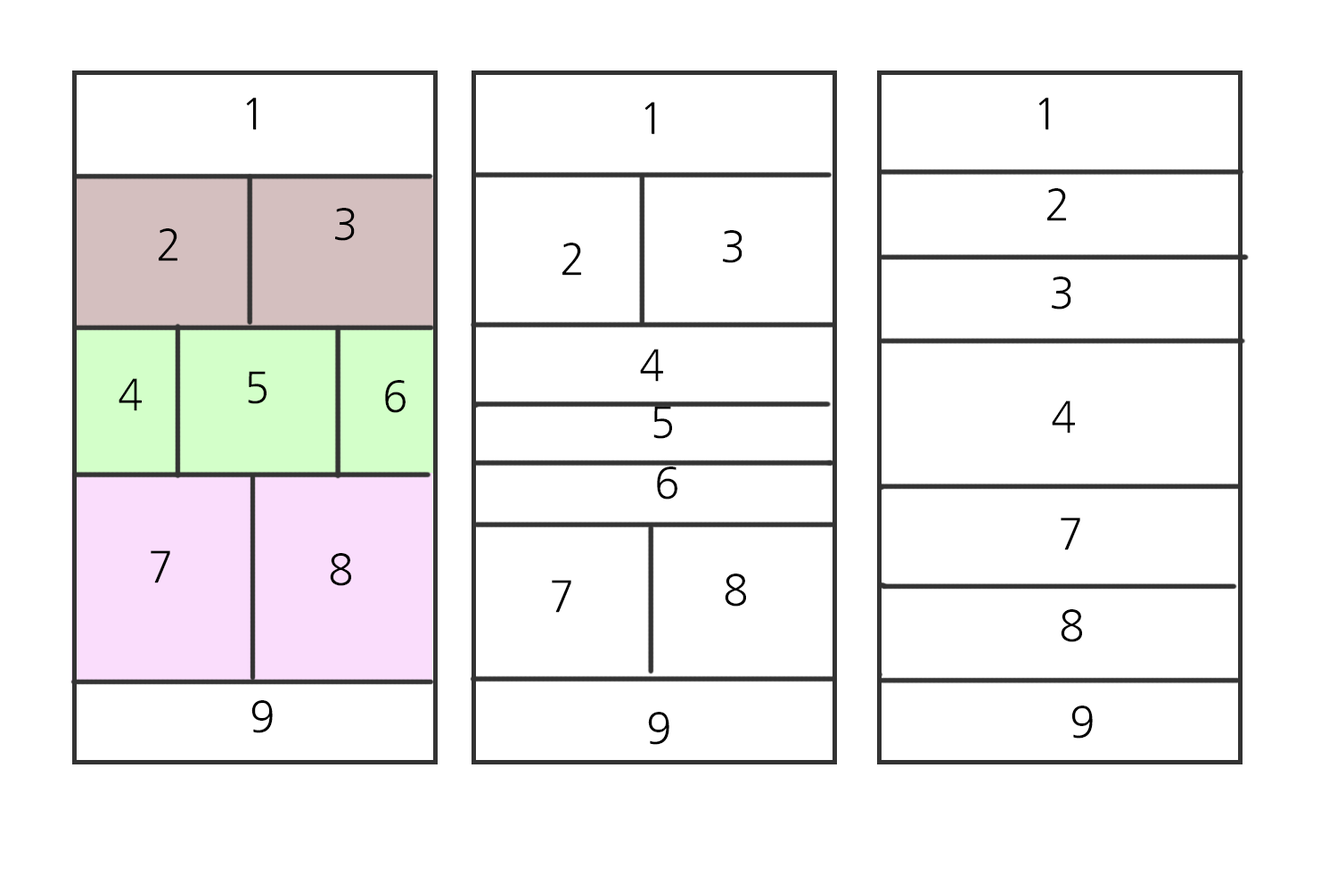
<style>
.page{position:relative;width:1337px;height:892px;background:#ffffff}
.page>*{position:absolute;margin:0}
.t1{font:42.8px "NanumGothic";color:#000000}
</style>
<div class="page">
<p class="t1" style="left:246px;top:97px;width:11px;height:33px">1</p>
<p class="t1" style="left:645px;top:102px;width:10px;height:33px">1</p>
<p class="t1" style="left:1039px;top:97px;width:10px;height:33px">1</p>
<p class="t1" style="left:1048px;top:188px;width:18px;height:33px">2</p>
<p class="t1" style="left:335px;top:208px;width:20px;height:33px">3</p>
<p class="t1" style="left:159px;top:228px;width:18px;height:33px">2</p>
<p class="t1" style="left:723px;top:230px;width:20px;height:33px">3</p>
<p class="t1" style="left:563px;top:243px;width:18px;height:33px">2</p>
<p class="t1" style="left:1052px;top:276px;width:20px;height:33px">3</p>
<p class="t1" style="left:640px;top:349px;width:23px;height:33px">4</p>
<p class="t1" style="left:248px;top:371px;width:19px;height:33px">5</p>
<p class="t1" style="left:119px;top:378px;width:23px;height:33px">4</p>
<p class="t1" style="left:385px;top:380px;width:21px;height:33px">6</p>
<p class="t1" style="left:1052px;top:400px;width:23px;height:33px">4</p>
<p class="t1" style="left:654px;top:406px;width:18px;height:33px">5</p>
<p class="t1" style="left:657px;top:466px;width:21px;height:33px">6</p>
<p class="t1" style="left:1061px;top:517px;width:20px;height:33px">7</p>
<p class="t1" style="left:151px;top:550px;width:19px;height:33px">7</p>
<p class="t1" style="left:330px;top:553px;width:21px;height:33px">8</p>
<p class="t1" style="left:552px;top:580px;width:20px;height:33px">7</p>
<p class="t1" style="left:725px;top:573px;width:21px;height:33px">8</p>
<p class="t1" style="left:1061px;top:609px;width:21px;height:33px">8</p>
<p class="t1" style="left:251px;top:700px;width:22px;height:33px">9</p>
<p class="t1" style="left:648px;top:711px;width:22px;height:33px">9</p>
<p class="t1" style="left:1072px;top:705px;width:21px;height:33px">9</p>
</div>
